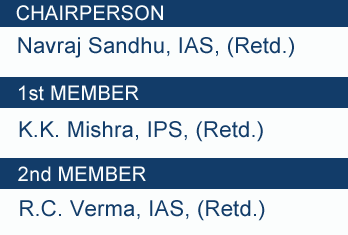
<style>
.page{position:relative;width:348px;height:235px;background:#fbfdfd}
.page>*{position:absolute;margin:0}
.t1{font:20px "ArialMT";letter-spacing:0.01em;color:#fbfdfd}
.t2{font:22px "ArialMT";letter-spacing:0.01em;color:#123c69}
</style>
<div class="page">
<p class="t1" style="left:16px;top:5px;width:147px;height:16px">CHAIRPERSON</p>
<p class="t2" style="left:18px;top:37px;width:276px;height:21px">Navraj Sandhu, IAS, (Retd.)</p>
<p class="t1" style="left:19px;top:85px;width:120px;height:16px">1st MEMBER</p>
<p class="t2" style="left:19px;top:121px;width:244px;height:21px">K.K. Mishra, IPS, (Retd.)</p>
<p class="t1" style="left:18px;top:166px;width:128px;height:16px">2nd MEMBER</p>
<p class="t2" style="left:20px;top:200px;width:245px;height:21px">R.C. Verma, IAS, (Retd.)</p>
</div>
